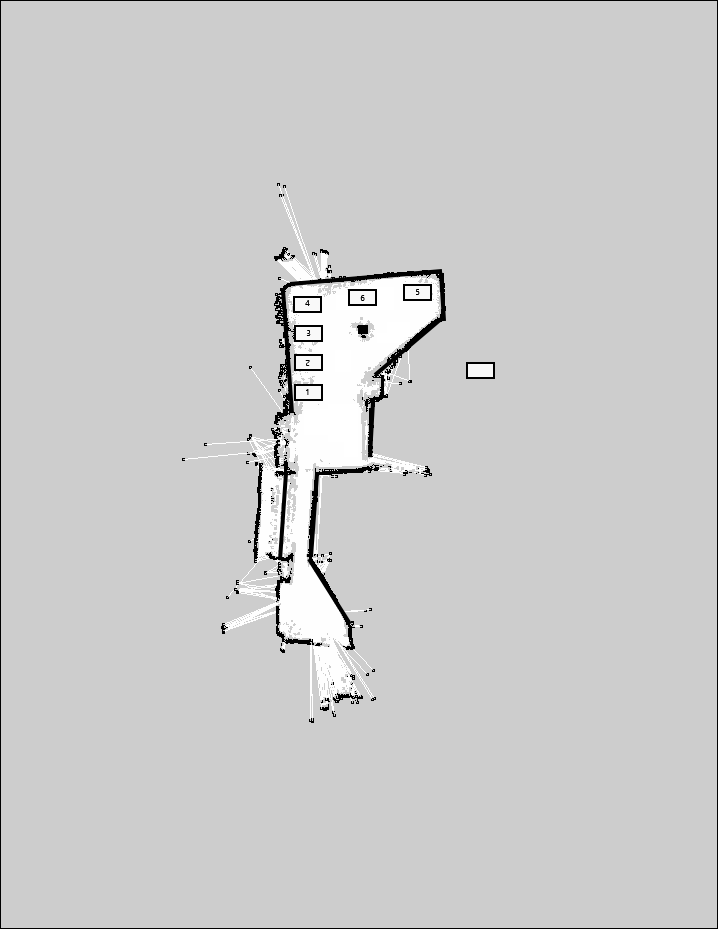
<style>
.page{position:relative;width:718px;height:929px;background:#cdcdcd}
.page>*{position:absolute;margin:0}
.t1{font:8px "NirmalaUI-Semilight";color:#000000}
.t2{font:8px "NirmalaUI-Semilight"}
</style>
<div class="page">
<p class="t1" style="left:416px;top:289px;width:4px;height:6px">5</p>
<p class="t1" style="left:305px;top:300px;width:5px;height:6px">4</p>
<p class="t1" style="left:360px;top:295px;width:5px;height:6px">6</p>
<p class="t1" style="left:306px;top:330px;width:5px;height:6px">3</p>
<p class="t1" style="left:305px;top:360px;width:5px;height:6px">2</p>
<p class="t2" style="left:306px;top:389px;width:3px;height:6px">1</p>
</div>
